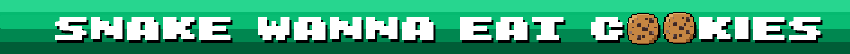
<style>
.page{position:relative;width:850px;height:54px;background:#27d68f}
.page>*{position:absolute;margin:0}
.t1{font:72px "8-bit-Arcade-In";color:#ffffff}
</style>
<div class="page">
<p class="t1" style="left:55px;top:17px;width:766px;height:23px">SNAKE WANna eat COOKIES</p>
</div>
